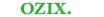
<style>
.page{position:relative;width:104px;height:17px;background:#ffffff}
.page>*{position:absolute;margin:0}
.t1{font:16.9px "MinionConceptRoman-Bold";color:#31b033;scale:1.12 1}
.t2{font:16.9px "MinionConceptRoman-Bold";color:#ffffff;scale:1.12 1}
</style>
<div class="page">
<p class="t1" style="left:20px;top:2px;width:67px;height:13px">OZIX.<span class="t2">to</span></p>
</div>
